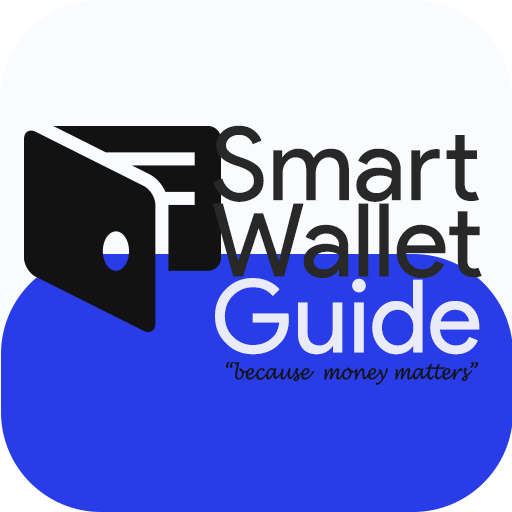
<style>
.page{position:relative;width:512px;height:512px;background:#283de8}
.page>*{position:absolute;margin:0}
.t1{font:101.5px/76.2px "ProductSans-Regular";color:#282828}
.t2{font:101.5px/76.2px "ProductSans-Regular";color:#e9ebf9}
.t3{font:20.2px "LucidaHandwriting-Italic";color:#121212;scale:0.87 1}
</style>
<div class="page">
<p class="t1" style="left:213px;top:125px;width:269px;height:230px">Smart<br>Wallet<br><span class="t2">Guide</span></p>
<p class="t3" style="left:226px;top:362px;width:252px;height:23px">“because  money matters”</p>
</div>
